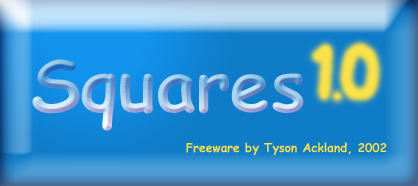
<style>
.page{position:relative;width:418px;height:186px}
.page>*{position:absolute;margin:0}
.t1{font:72px "ComicSansMS-Bold"}
.t2{font:12px "ComicSansMS-Bold";color:#fce149}
</style>
<div class="page">
<p class="t1" style="left:32px;top:59px;width:272px;height:72px">Squares</p>
<p class="t2" style="left:186px;top:142px;width:201px;height:14px">Freeware by Tyson Ackland, 2002</p>
</div>
